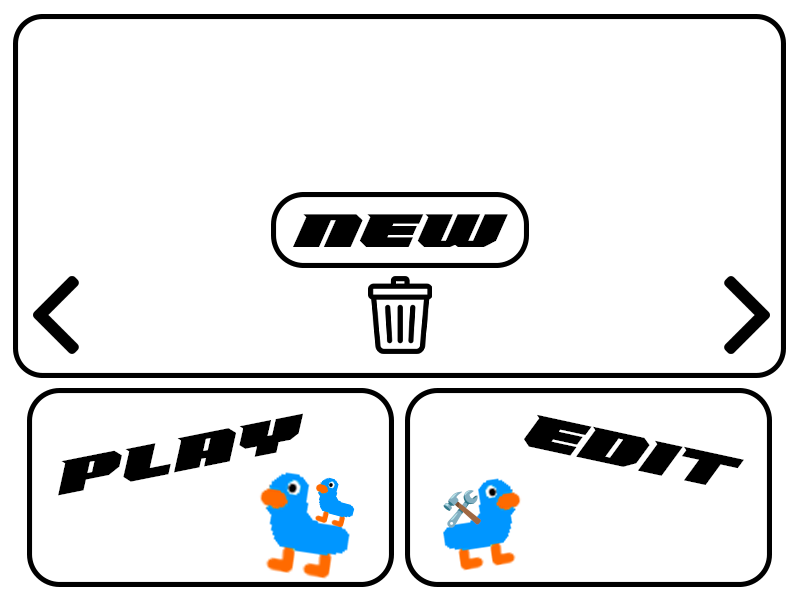
<style>
.page{position:relative;width:800px;height:600px;background:#ffffff}
.page>*{position:absolute;margin:0}
.t1{font:50px "HighSwift-Regular";color:#000000}
</style>
<div class="page">
<p class="t1" style="left:293px;top:214px;width:215px;height:33px">NEW</p>
<p class="t1" style="left:58px;top:413px;width:245px;height:83px;rotate:-11deg">PLAY</p>
<p class="t1" style="left:524px;top:414px;width:220px;height:71px;rotate:12deg">EDIT</p>
</div>
